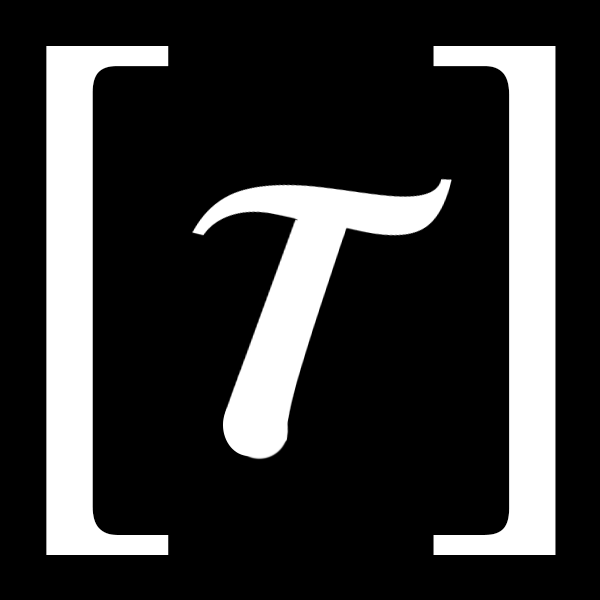
<style>
.page{position:relative;width:600px;height:600px;background:#000000}
.page>*{position:absolute;margin:0}
.t1{font:559.4px "CenturySchoolbook";color:#ffffff;scale:1.07 1}
</style>
<div class="page">
<p class="t1" style="left:46px;top:46px;width:510px;height:509px">[     ]</p>
</div>
